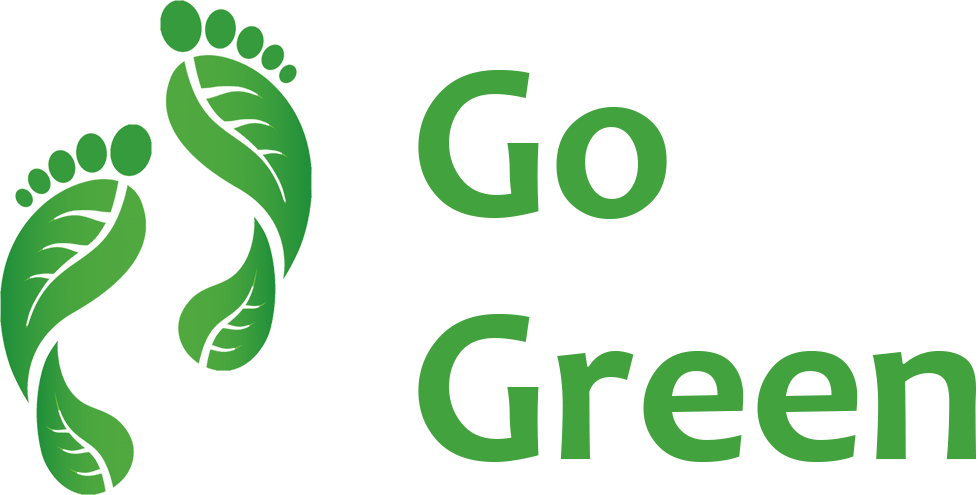
<style>
.page{position:relative;width:980px;height:495px;background:#ffffff}
.page>*{position:absolute;margin:0}
.t1{font:224px/244px "Candara-Bold";color:#59ad40}
</style>
<div class="page">
<p class="t1" style="left:418px;top:70px;width:558px;height:392px">Go <br>Green</p>
</div>
